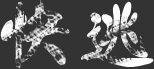
<style>
.page{position:relative;width:154px;height:69px;background:#333333}
.page>*{position:absolute;margin:0}
.t1{font:80.2px "HDZK--HSJHDTJ-01"}
</style>
<div class="page">
<p class="t1" style="left:0px;top:0px;width:154px;height:69px">快逃</p>
</div>
